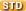
<style>
.page{position:relative;width:26px;height:11px}
.page>*{position:absolute;margin:0}
.t1{font:8.6px "ArialRoundedMTBold";letter-spacing:0.1em;color:#ffffff}
</style>
<div class="page">
<p class="t1" style="left:2px;top:2px;width:20px;height:7px">STD</p>
</div>
